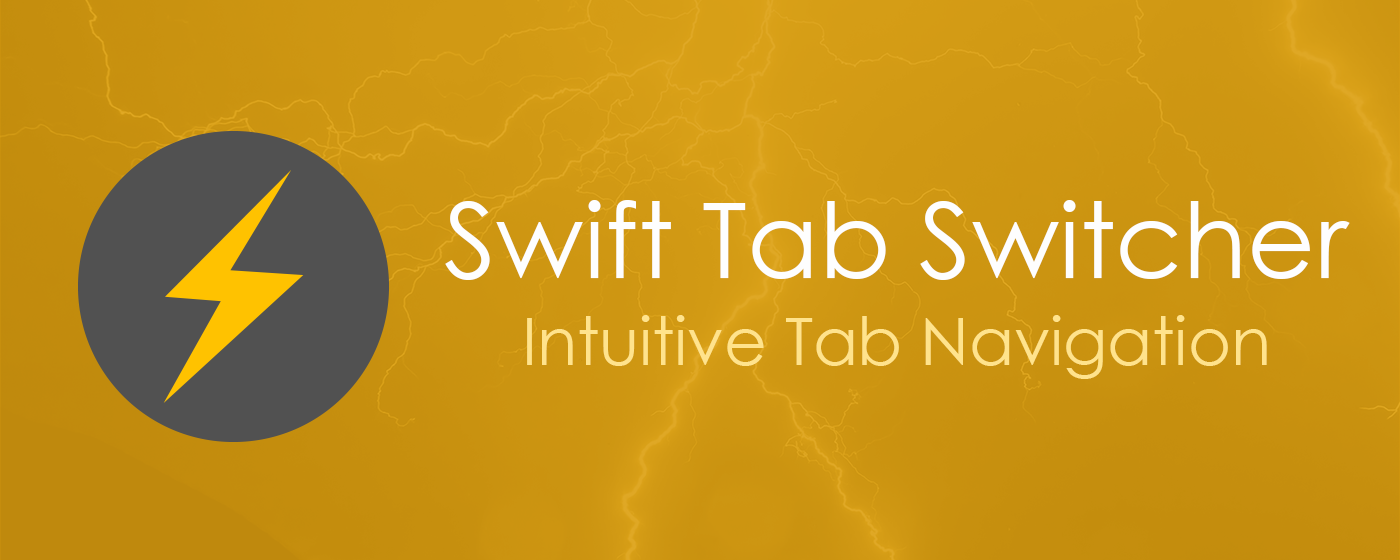
<style>
.page{position:relative;width:1400px;height:560px}
.page>*{position:absolute;margin:0}
.t1{font:105px "CenturyGothic";color:#fefefe}
.t2{font:65.6px "CenturyGothic";color:#ffe38c}
</style>
<div class="page">
<p class="t1" style="left:445px;top:200px;width:905px;height:80px">Swift Tab Switcher</p>
<p class="t2" style="left:527px;top:315px;width:740px;height:64px">Intuitive Tab Navigation</p>
</div>
